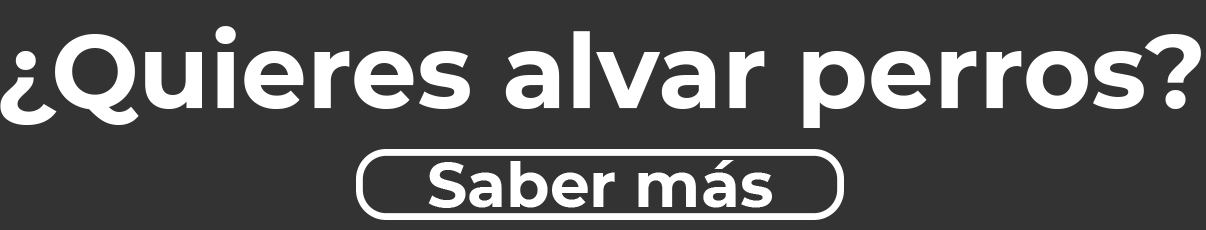
<style>
.page{position:relative;width:1206px;height:230px;background:#333333}
.page>*{position:absolute;margin:0}
.t1{font:103.9px "Montserrat-Bold";color:#ffffff}
.t2{font:62.7px "Montserrat-Bold";color:#ffffff}
</style>
<div class="page">
<p class="t1" style="left:0px;top:26px;width:1201px;height:102px">¿Quieres alvar perros?</p>
<p class="t2" style="left:428px;top:160px;width:344px;height:48px">Saber más</p>
</div>
